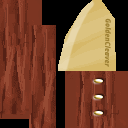
<style>
.page{position:relative;width:128px;height:128px}
.page>*{position:absolute;margin:0}
.t1{font:7.3px "OpenSans-ExtraboldItalic";color:#9c7f32;scale:0.93 1}
</style>
<div class="page">
<p class="t1" style="left:104px;top:18px;width:7px;height:49px;rotate:91deg">GoldenCleaver</p>
</div>
